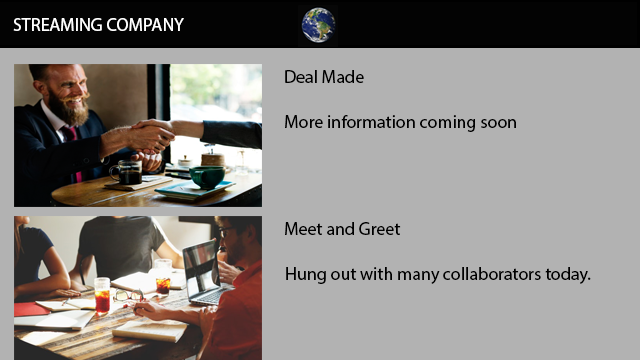
<style>
.page{position:relative;width:640px;height:360px;background:#b2b2b2}
.page>*{position:absolute;margin:0}
.t1{font:18px "KozGoPr6N-Regular";color:#ffffff}
.t2{font:18px "KozGoPr6N-Regular";color:#000000}
</style>
<div class="page">
<p class="t1" style="left:13px;top:18px;width:171px;height:13px">STREAMING COMPANY</p>
<p class="t2" style="left:285px;top:70px;width:79px;height:13px">Deal Made</p>
<p class="t2" style="left:285px;top:115px;width:231px;height:17px">More information coming soon</p>
<p class="t2" style="left:285px;top:222px;width:116px;height:13px">Meet and Greet</p>
<p class="t2" style="left:286px;top:267px;width:305px;height:17px">Hung out with many collaborators today.</p>
</div>
